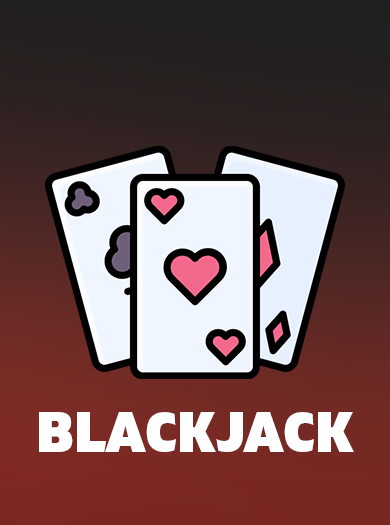
<style>
.page{position:relative;width:390px;height:525px}
.page>*{position:absolute;margin:0}
.t1{font:56.1px "Gilam-BlackDEMO";color:#ffffff}
</style>
<div class="page">
<p class="t1" style="left:39px;top:412px;width:315px;height:40px">BLACKJACK</p>
</div>
